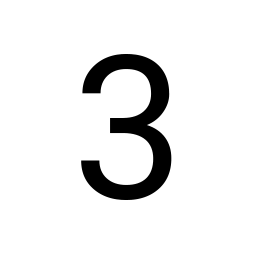
<style>
.page{position:relative;width:256px;height:256px;background:#ffffff}
.page>*{position:absolute;margin:0}
.t1{font:200px "Roboto-Regular";color:#000000}
</style>
<div class="page">
<p class="t1" style="left:81px;top:54px;width:91px;height:146px">3</p>
</div>
